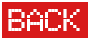
<style>
.page{position:relative;width:90px;height:40px;background:#d81a1a}
.page>*{position:absolute;margin:0}
.t1{font:30px "ElectronicHighwaySign";color:#ffffff}
</style>
<div class="page">
<p class="t1" style="left:8px;top:9px;width:72px;height:22px">BACK</p>
</div>
